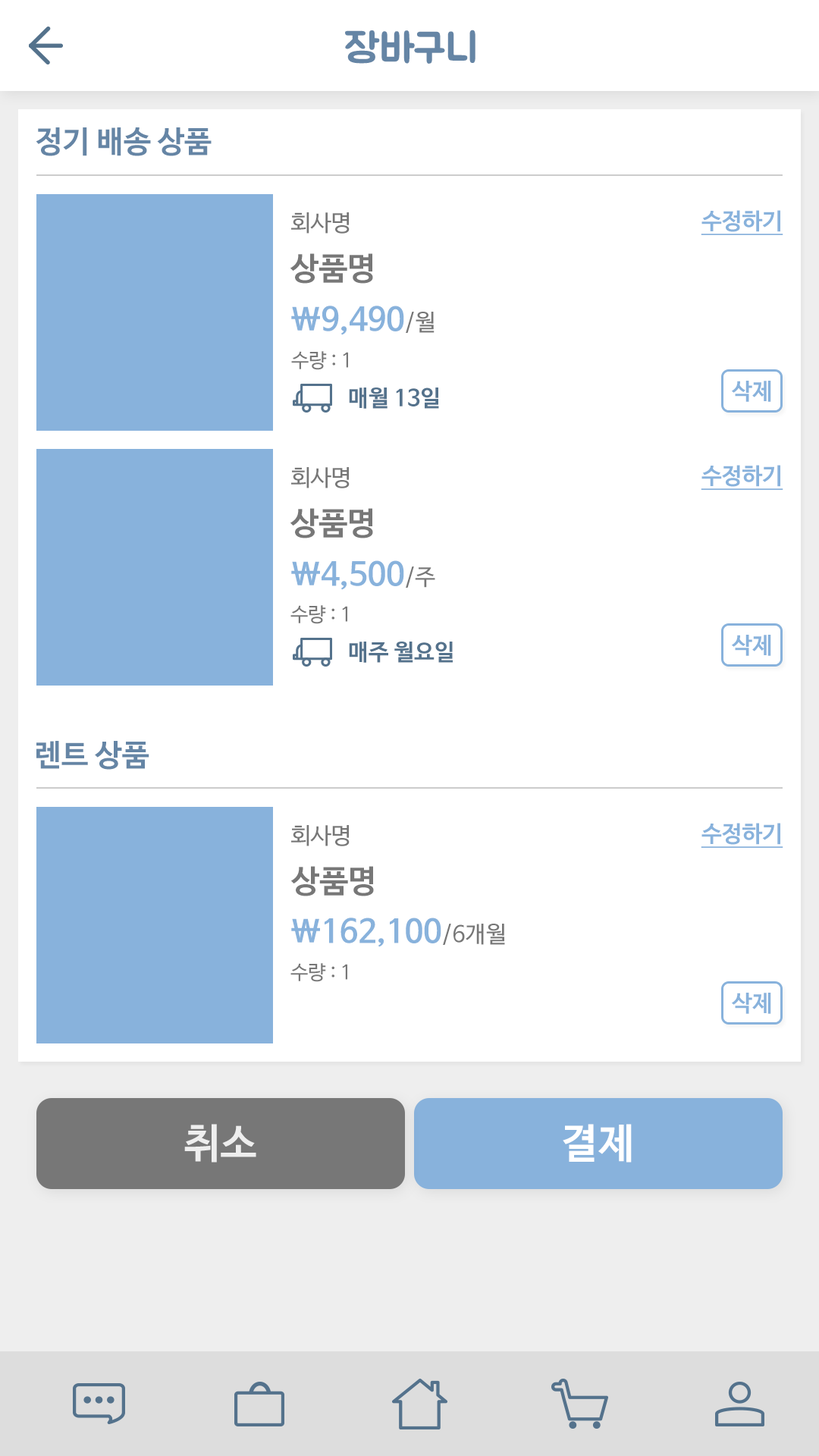
<style>
.page{position:relative;width:819px;height:1456px;background:#ffffff}
.page>*{position:absolute;margin:0}
.t1{font:40.9px "BMJUA";color:#6585a5}
.t2{font:30.3px "NanumBarunGothicBold";color:#6585a5}
.t3{font:22.7px "NanumBarunGothic";color:#777777}
.t4{font:22.7px "NanumBarunGothicBold";color:#88b2dc;text-decoration:underline}
.t5{font:31.8px "NanumBarunGothicBold";color:#777777}
.t6{font:31.8px "NanumBarunGothicBold";color:#88b2dc}
.t7{font:19.7px "NanumBarunGothic";color:#777777}
.t8{font:22.7px "NanumBarunGothicBold";color:#54728c}
.t9{font:22.7px "NanumBarunGothicBold";color:#88b2dc}
.t10{font:40.9px "NanumBarunGothicBold";color:#eeeeee}
.t11{font:40.9px "NanumBarunGothicBold";color:#ffffff}
</style>
<div class="page">
<p class="t1" style="left:345px;top:30px;width:130px;height:34px">장바구니</p>
<p class="t2" style="left:36px;top:127px;width:176px;height:29px">정기 배송 상품</p>
<p class="t3" style="left:291px;top:212px;width:59px;height:22px">회사명</p>
<p class="t4" style="left:701px;top:210px;width:82px;height:25px">수정하기</p>
<p class="t5" style="left:290px;top:253px;width:83px;height:31px">상품명</p>
<p class="t6" style="left:291px;top:306px;width:144px;height:29px">\9,490<span class="t3">/월</span></p>
<p class="t7" style="left:291px;top:351px;width:57px;height:19px">수량 : 1</p>
<p class="t8" style="left:349px;top:388px;width:90px;height:21px">매월 13일</p>
<p class="t9" style="left:732px;top:381px;width:39px;height:21px">삭제</p>
<p class="t3" style="left:291px;top:467px;width:59px;height:21px">회사명</p>
<p class="t4" style="left:701px;top:465px;width:82px;height:25px">수정하기</p>
<p class="t5" style="left:290px;top:508px;width:83px;height:30px">상품명</p>
<p class="t6" style="left:291px;top:560px;width:144px;height:30px">\4,500<span class="t3">/주</span></p>
<p class="t7" style="left:290px;top:605px;width:57px;height:19px">수량 : 1</p>
<p class="t8" style="left:349px;top:642px;width:104px;height:21px">매주 월요일</p>
<p class="t9" style="left:732px;top:635px;width:39px;height:21px">삭제</p>
<p class="t2" style="left:36px;top:741px;width:113px;height:29px">렌트 상품</p>
<p class="t3" style="left:291px;top:825px;width:59px;height:21px">회사명</p>
<p class="t4" style="left:701px;top:823px;width:82px;height:25px">수정하기</p>
<p class="t5" style="left:290px;top:866px;width:84px;height:30px">상품명</p>
<p class="t6" style="left:291px;top:918px;width:214px;height:29px">\162,100<span class="t3">/6개월</span></p>
<p class="t7" style="left:290px;top:963px;width:57px;height:19px">수량 : 1</p>
<p class="t9" style="left:732px;top:993px;width:39px;height:21px">삭제</p>
<p class="t10" style="left:184px;top:1124px;width:72px;height:39px">취소</p>
<p class="t11" style="left:563px;top:1124px;width:69px;height:39px">결제</p>
</div>
